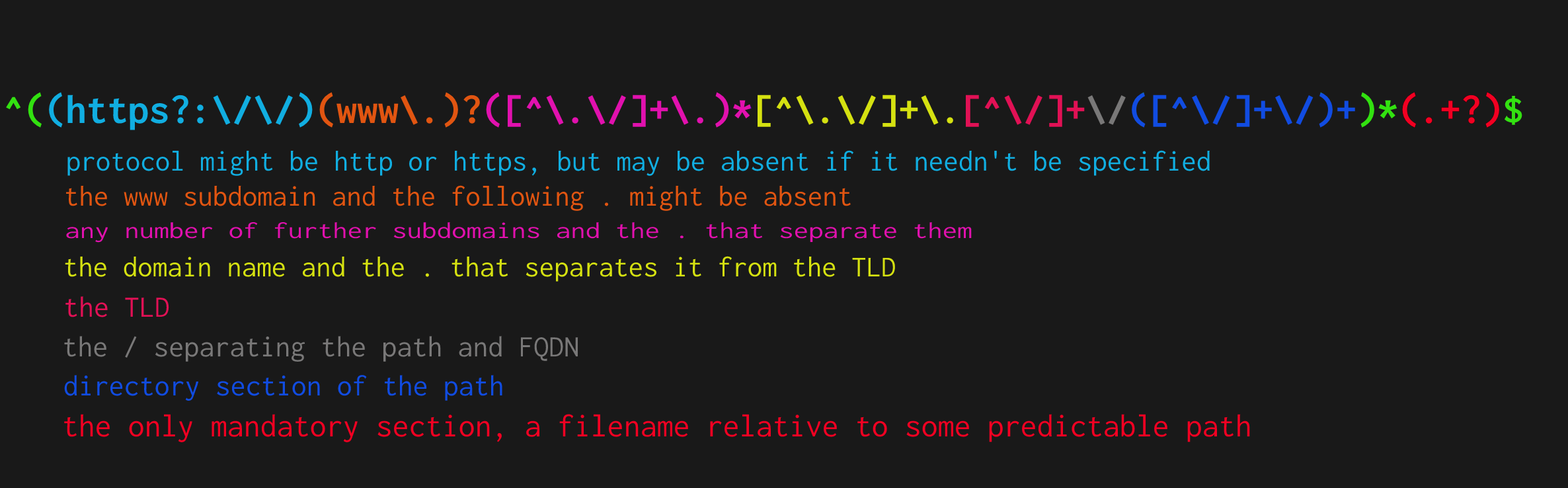
<style>
.page{position:relative;width:1568px;height:488px;background:#191919}
.page>*{position:absolute;margin:0}
.t1{font:41.6px "Inconsolata-Bold"}
.t2{font:29.7px "Inconsolata-Regular";color:#11aee1}
.t3{font:29.7px "Inconsolata-Regular";color:#e15511}
.t4{font:23.7px "Inconsolata-Regular";color:#e111ae;scale:1.26 1}
.t5{font:29.7px "Inconsolata-Regular";color:#d5e111}
.t6{font:30.4px "Inconsolata-Regular";color:#e11155}
.t7{font:30.4px "Inconsolata-Regular";color:#797878}
.t8{font:30.4px "Inconsolata-Regular";color:#114ce1}
.t9{font:33.1px "Inconsolata-Regular";color:#f20022}
</style>
<div class="page">
<p class="t1" style="left:6px;top:92px;width:1516px;height:38px">^((https?:\/\/)(www\.)?([^\.\/]+\.)*[^\.\/]+\.[^\/]+\/([^\/]+\/)+)*(.+?)$</p>
<p class="t2" style="left:67px;top:150px;width:1143px;height:26px">protocol might be http or https, but may be absent if it needn't be specified</p>
<p class="t3" style="left:66px;top:185px;width:785px;height:26px">the www subdomain and the following . might be absent</p>
<p class="t4" style="left:66px;top:222px;width:906px;height:21px">any number of further subdomains and the . that separate them</p>
<p class="t5" style="left:65px;top:256px;width:830px;height:26px">the domain name and the . that separates it from the TLD</p>
<p class="t6" style="left:65px;top:296px;width:104px;height:21px">the TLD</p>
<p class="t7" style="left:64px;top:336px;width:514px;height:26px">the / separating the path and FQDN</p>
<p class="t8" style="left:64px;top:375px;width:438px;height:26px">directory section of the path</p>
<p class="t9" style="left:64px;top:414px;width:1186px;height:28px">the only mandatory section, a filename relative to some predictable path</p>
</div>
